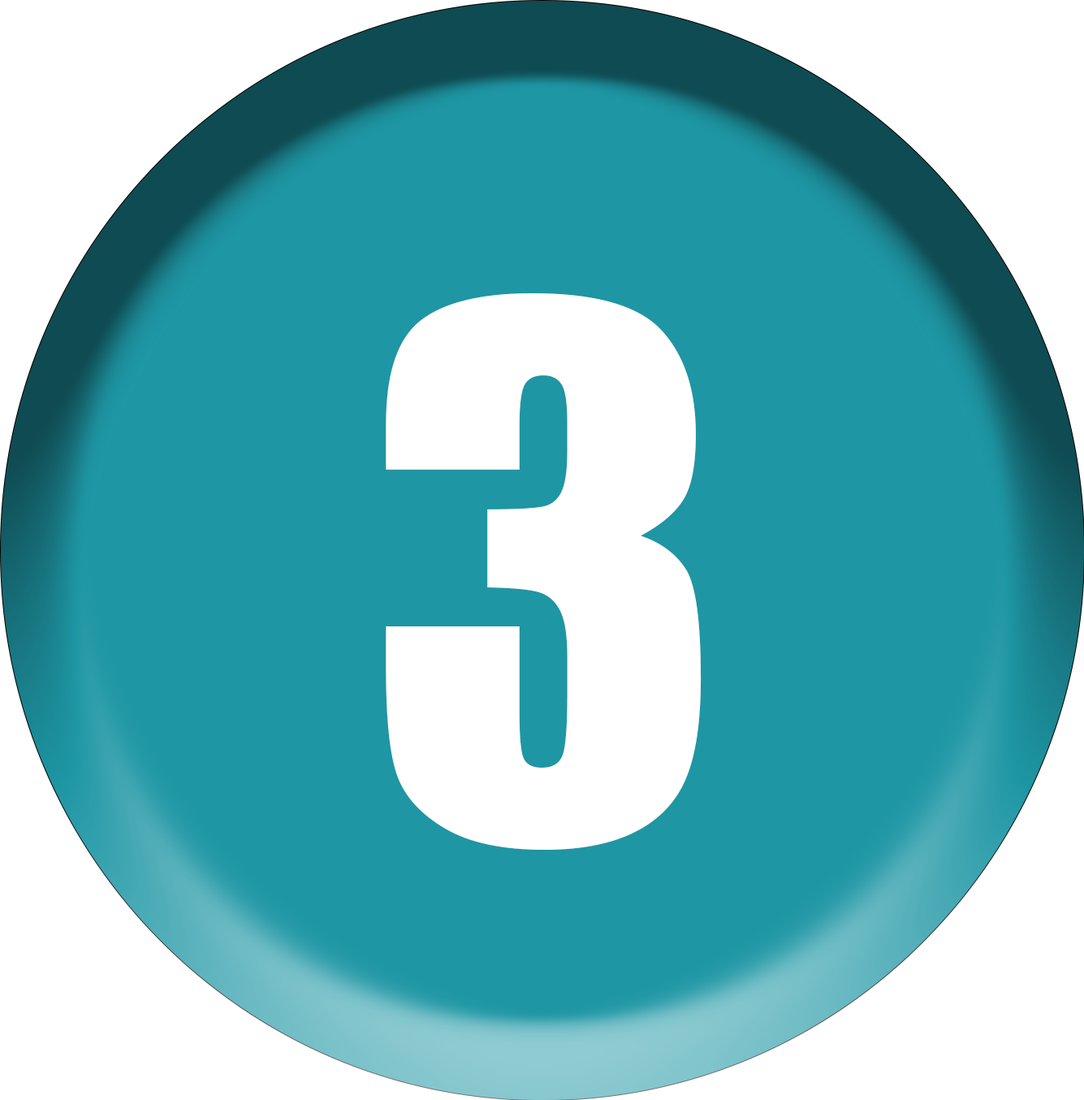
<style>
.page{position:relative;width:1084px;height:1100px;background:#1e96a4}
.page>*{position:absolute;margin:0}
.t1{font:676.8px "Impact";color:#ffffff}
</style>
<div class="page">
<p class="t1" style="left:386px;top:293px;width:316px;height:557px">3</p>
</div>
